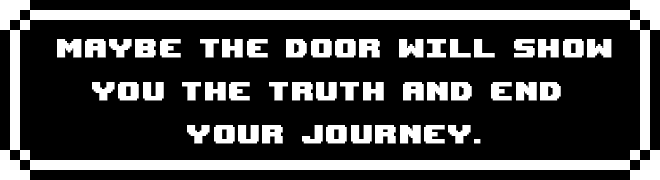
<style>
.page{position:relative;width:660px;height:180px;background:#000000}
.page>*{position:absolute;margin:0}
.t1{font:36px "UpheavalTT-BRK-";letter-spacing:0.05em;color:#ffffff;font-weight:bold}
</style>
<div class="page">
<p class="t1" style="left:57px;top:39px;width:555px;height:105px;text-align:center">maybe the door will show <br>you the truth and end <br>your journey.</p>
</div>
